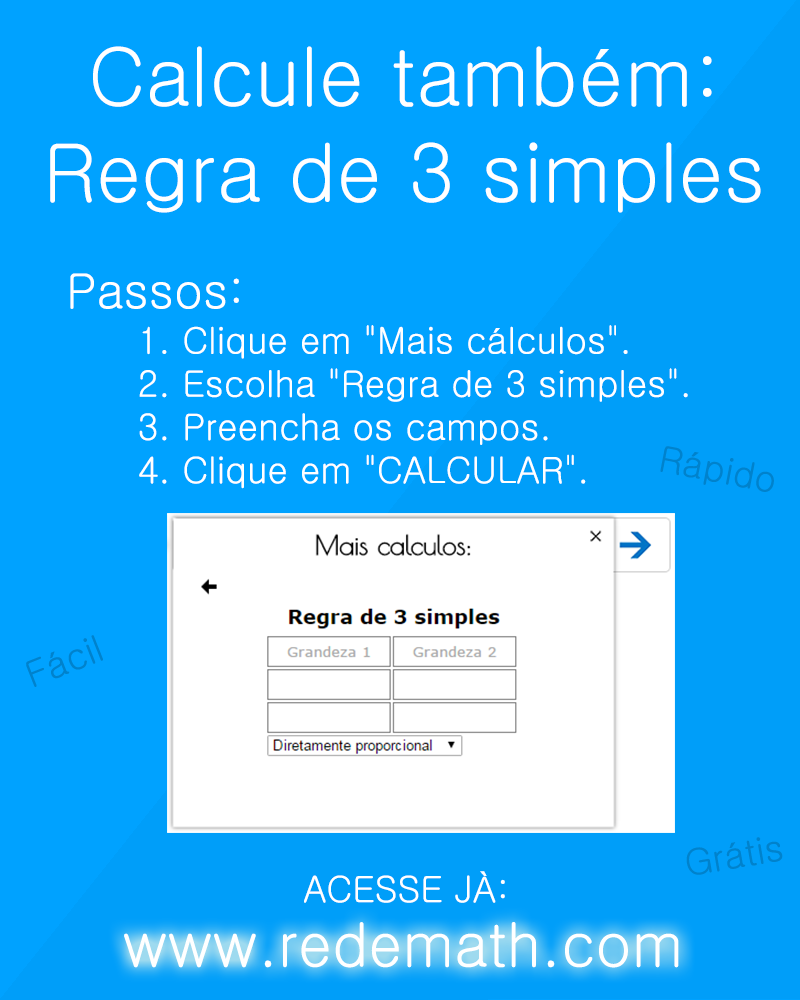
<style>
.page{position:relative;width:800px;height:1000px;background:#00a2ff}
.page>*{position:absolute;margin:0}
.t1{font:80px "Gulim";color:#ffffff}
.t2{font:48px "Gulim";color:#ffffff}
.t3{font:36px "Gulim";color:#ffffff}
.t4{font:36px "Gulim";color:#0082cc}
.t5{font:60px "Gulim";color:#ffffff}
</style>
<div class="page">
<p class="t1" style="left:50px;top:46px;width:711px;height:167px;text-align:center">Calcule também:<br>Regra de 3 simples</p>
<p class="t2" style="left:70px;top:273px;width:169px;height:36px">Passos:</p>
<p class="t3" style="left:139px;top:325px;width:549px;height:164px">1. Clique em "Mais cálculos".<br> 2. Escolha "Regra de 3 simples".<br> 3. Preencha os campos. <br> 4. Clique em "CALCULAR".</p>
<p class="t4" style="left:660px;top:446px;width:114px;height:46px;rotate:11deg">Rápido</p>
<p class="t4" style="left:26px;top:635px;width:77px;height:52px;rotate:-22deg">Fácil</p>
<p class="t4" style="left:686px;top:837px;width:97px;height:38px;rotate:-10deg">Grátis</p>
<p class="t3" style="left:304px;top:871px;width:201px;height:32px">ACESSE JÀ:</p>
<p class="t5" style="left:124px;top:922px;width:555px;height:46px">www.redemath.com</p>
</div>
